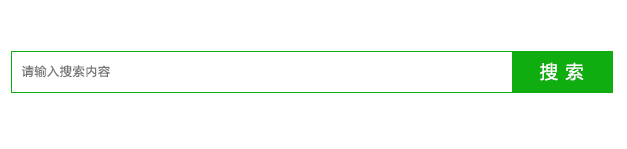
<style>
.page{position:relative;width:627px;height:149px;background:#ffffff}
.page>*{position:absolute;margin:0}
.t1{font:12px "MicrosoftYaHei";letter-spacing:0.06em;color:#757575}
.t2{font:18px "MicrosoftYaHei";letter-spacing:0.06em;color:#ffffff}
</style>
<div class="page">
<p class="t1" style="left:21px;top:65px;width:89px;height:13px">请输入搜索内容</p>
<p class="t2" style="left:540px;top:62px;width:44px;height:19px">搜 索</p>
</div>
